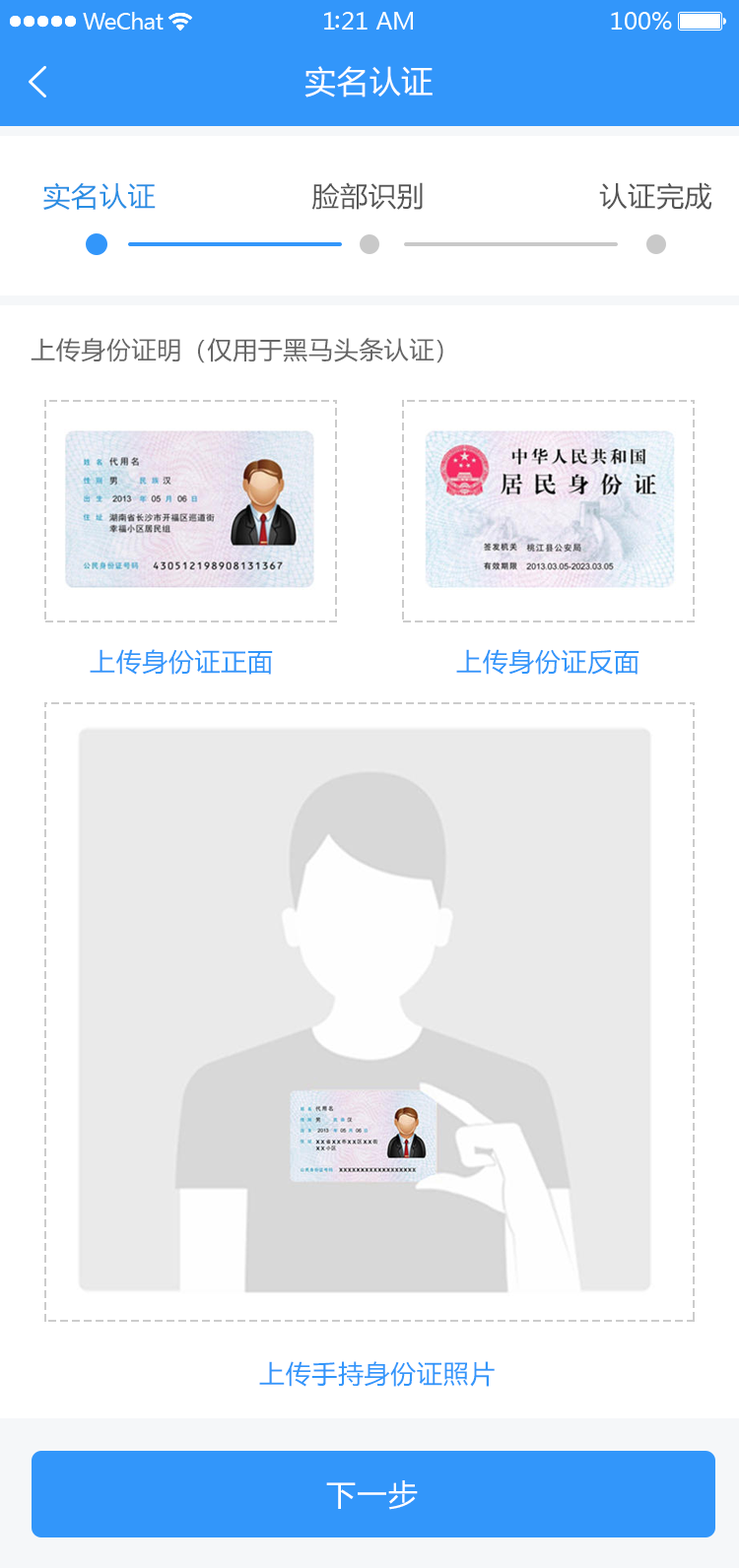
<style>
.page{position:relative;width:739px;height:1568px;background:#ffffff}
.page>*{position:absolute;margin:0}
.t1{font:31.5px "MicrosoftYaHei";letter-spacing:0.025em;color:#ffffff}
.t2{font:27.6px "MicrosoftYaHei";letter-spacing:0.025em;color:#2a8ee3}
.t3{font:27.6px "MicrosoftYaHei";letter-spacing:0.025em;color:#555555}
.t4{font:24.6px "MicrosoftYaHei";letter-spacing:0.025em;color:#666666}
.t5{font:25.6px "MicrosoftYaHei";letter-spacing:0.025em;color:#3296fa}
.t6{font:29.5px "MicrosoftYaHei";letter-spacing:0.05em;color:#ffffff}
</style>
<div class="page">
<p class="t1" style="left:304px;top:66px;width:128px;height:32px">实名认证</p>
<p class="t2" style="left:43px;top:182px;width:113px;height:28px">实名认证</p>
<p class="t3" style="left:311px;top:182px;width:112px;height:28px">脸部识别</p>
<p class="t3" style="left:599px;top:182px;width:113px;height:28px">认证完成</p>
<p class="t4" style="left:31px;top:338px;width:412px;height:25px">上传身份证明（仅用于黑马头条认证）</p>
<p class="t5" style="left:90px;top:649px;width:183px;height:26px">上传身份证正面</p>
<p class="t5" style="left:456px;top:649px;width:183px;height:26px">上传身份证反面</p>
<p class="t5" style="left:259px;top:1361px;width:235px;height:26px">上传手持身份证照片</p>
<p class="t6" style="left:326px;top:1480px;width:92px;height:30px">下一步</p>
</div>
